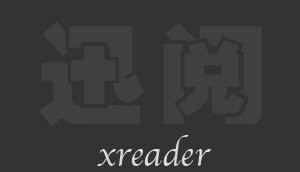
<style>
.page{position:relative;width:300px;height:172px;background:#333333}
.page>*{position:absolute;margin:0}
.t1{font:110px "HYb4gj";color:#404040}
.t2{font:36px "Apple-Chancery";color:#dadada}
</style>
<div class="page">
<p class="t1" style="left:39px;top:21px;width:223px;height:106px">迅 阅</p>
<p class="t2" style="left:97px;top:135px;width:115px;height:31px">xreader</p>
</div>
